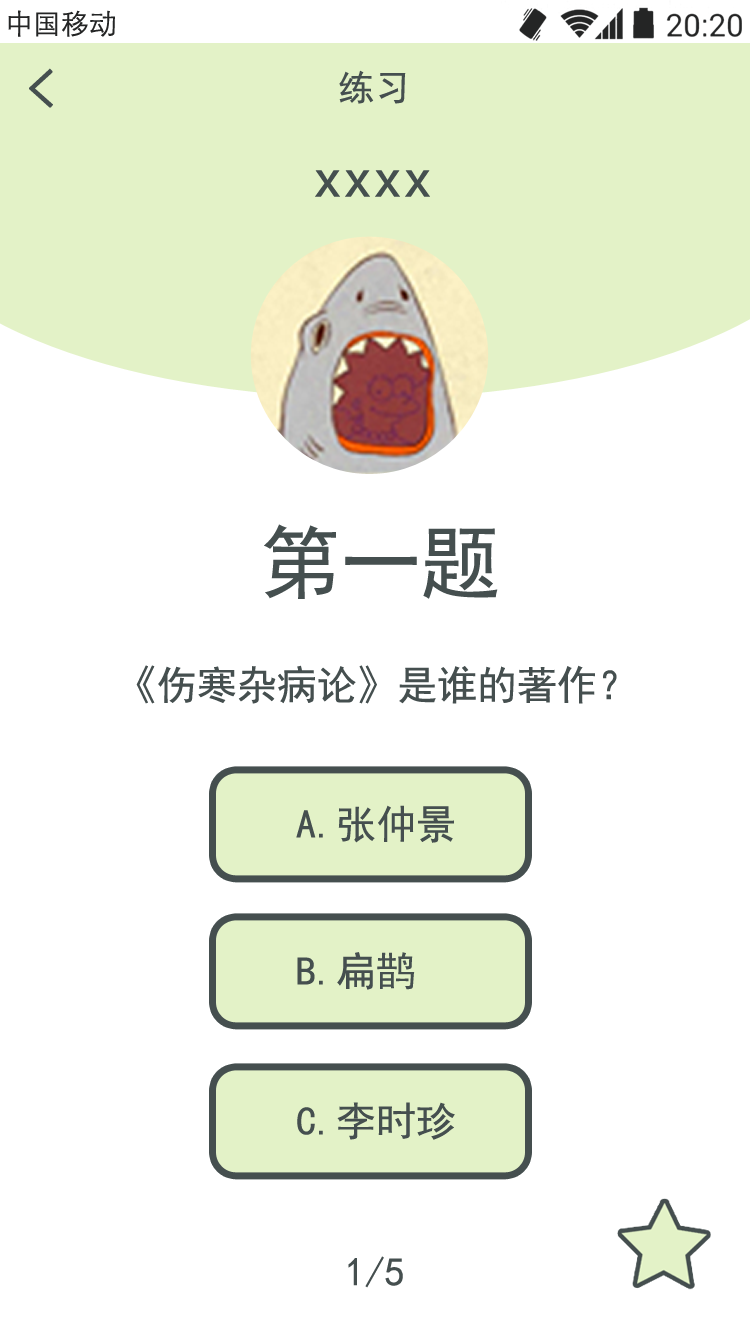
<style>
.page{position:relative;width:750px;height:1334px;background:#ffffff}
.page>*{position:absolute;margin:0}
.t1{font:52.1px "SimHei";color:#454f4f;font-weight:bold}
.t2{font:36px "SimHei";color:#454f4f}
.t3{font:60px "SimHei";color:#454f4f}
.t4{font:80px "SimHei";color:#454f4f}
.t5{font:40px "SimHei";color:#454f4f}
</style>
<div class="page">
<p class="t1" style="left:29px;top:68px;width:24px;height:40px">&lt;</p>
<p class="t2" style="left:339px;top:70px;width:67px;height:34px">练习</p>
<p class="t3" style="left:315px;top:170px;width:115px;height:27px">xxxx</p>
<p class="t4" style="left:264px;top:524px;width:234px;height:75px">第一题</p>
<p class="t5" style="left:136px;top:665px;width:481px;height:39px">《伤寒杂病论》是谁的著作？</p>
<p class="t5" style="left:296px;top:805px;width:158px;height:38px">A.张仲景</p>
<p class="t5" style="left:297px;top:952px;width:118px;height:38px">B.扁鹊</p>
<p class="t5" style="left:297px;top:1102px;width:158px;height:38px">C.李时珍</p>
<p class="t5" style="left:348px;top:1256px;width:55px;height:32px">1/5</p>
</div>
